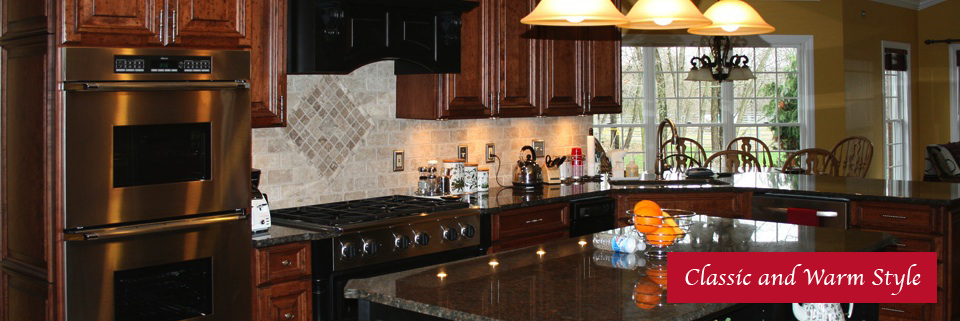
<style>
.page{position:relative;width:960px;height:321px}
.page>*{position:absolute;margin:0}
.t1{font:24px "Apple-Chancery";color:#ffffff}
</style>
<div class="page">
<p class="t1" style="left:685px;top:264px;width:236px;height:31px">Classic and Warm Style</p>
</div>
